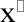
<style>
.page{position:relative;width:24px;height:22px;background:#ffffff}
.page>*{position:absolute;margin:0}
.t1{font:30px "TimesNewRomanPSMT";color:#000000;scale:1.05 1}
</style>
<div class="page">
<p class="t1" style="left:0px;top:8px;width:16px;height:14px">x</p>
</div>
